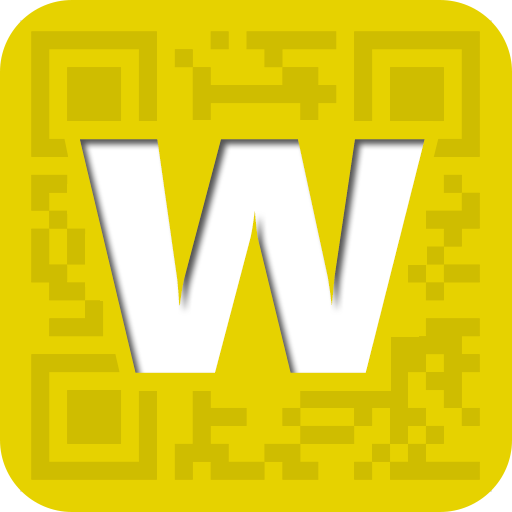
<style>
.page{position:relative;width:512px;height:512px;background:#e6d200}
.page>*{position:absolute;margin:0}
.t1{font:333.3px "SegoeUIBlack";letter-spacing:0.01em;color:#ffffff}
</style>
<div class="page">
<p class="t1" style="left:80px;top:139px;width:345px;height:234px">W</p>
</div>
